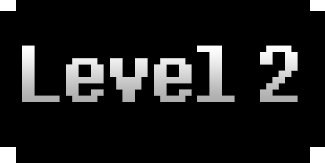
<style>
.page{position:relative;width:325px;height:163px;background:#000000}
.page>*{position:absolute;margin:0}
.t1{font:100px "8bitoperator-JVE"}
</style>
<div class="page">
<p class="t1" style="left:22px;top:45px;width:276px;height:57px">Level 2</p>
</div>
